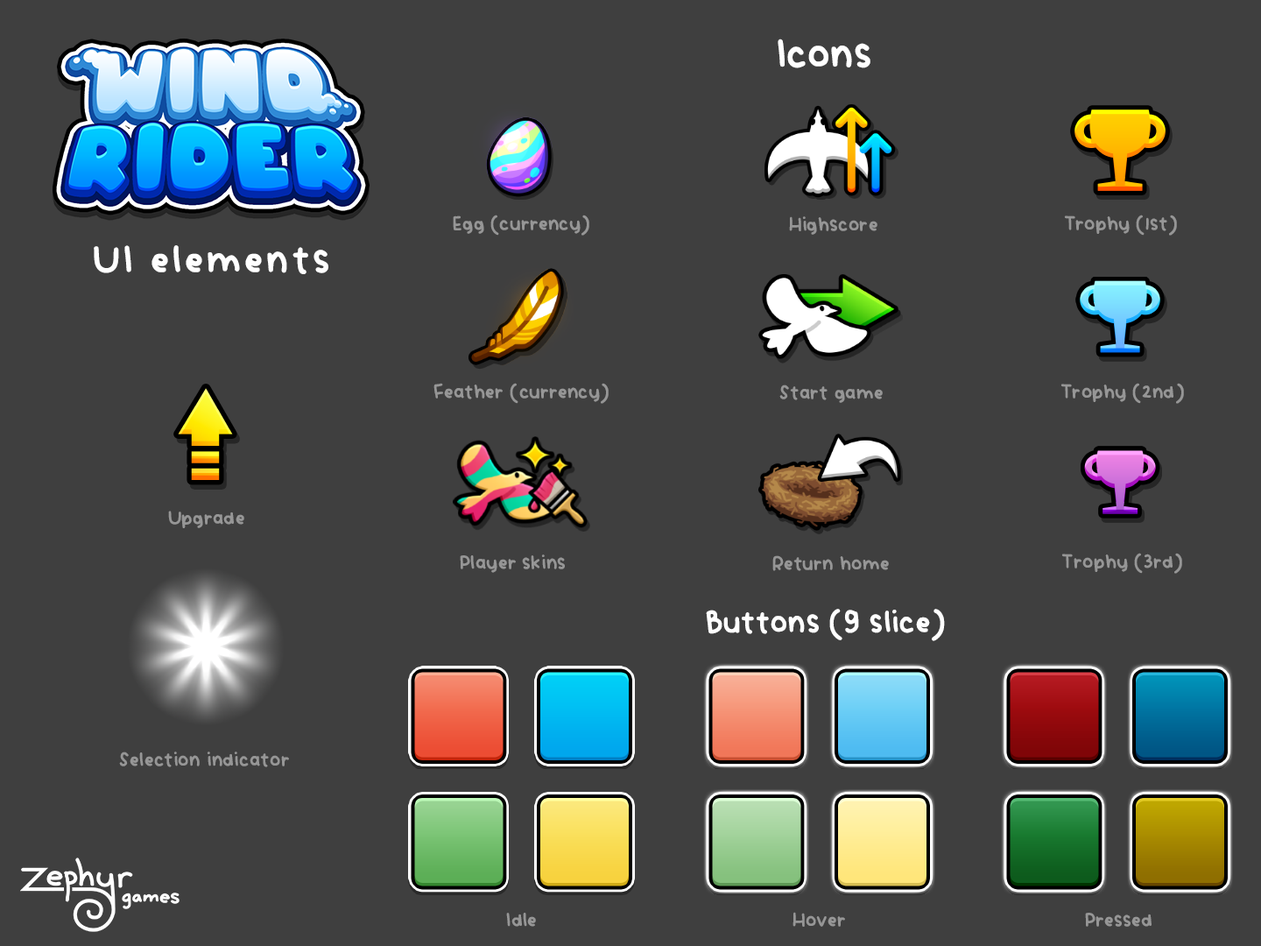
<style>
.page{position:relative;width:1261px;height:946px;background:#3f3f3f}
.page>*{position:absolute;margin:0}
.t1{font:60.8px "Vividly-Regular";letter-spacing:-0.05em;color:#ffffff}
.t2{font:29.4px "Vividly-Regular";letter-spacing:-0.05em;color:#969696}
.t3{font:58.5px "Vividly-Regular";color:#ffffff}
.t4{font:46.7px "Vividly-Regular";letter-spacing:-0.05em;color:#ffffff}
</style>
<div class="page">
<p class="t1" style="left:778px;top:39px;width:92px;height:29px">Icons</p>
<p class="t2" style="left:453px;top:215px;width:136px;height:21px">Egg (currency)</p>
<p class="t2" style="left:789px;top:216px;width:88px;height:19px">Highscore</p>
<p class="t2" style="left:1064px;top:215px;width:113px;height:21px">Trophy (1st)</p>
<p class="t3" style="left:94px;top:245px;width:234px;height:29px">UI elements</p>
<p class="t2" style="left:433px;top:383px;width:176px;height:21px">Feather (currency)</p>
<p class="t2" style="left:779px;top:384px;width:104px;height:19px">Start game</p>
<p class="t2" style="left:1060px;top:383px;width:124px;height:21px">Trophy (2nd)</p>
<p class="t2" style="left:168px;top:510px;width:76px;height:18px">Upgrade</p>
<p class="t2" style="left:460px;top:554px;width:105px;height:19px">Player skins</p>
<p class="t2" style="left:772px;top:555px;width:117px;height:16px">Return home</p>
<p class="t2" style="left:1061px;top:553px;width:121px;height:21px">Trophy (3rd)</p>
<p class="t4" style="left:706px;top:609px;width:239px;height:32px">Buttons (9 slice)</p>
<p class="t2" style="left:119px;top:751px;width:170px;height:16px">Selection indicator</p>
<p class="t2" style="left:506px;top:912px;width:30px;height:14px">Idle</p>
<p class="t2" style="left:792px;top:912px;width:53px;height:14px">Hover</p>
<p class="t2" style="left:1085px;top:912px;width:66px;height:14px">Pressed</p>
</div>
